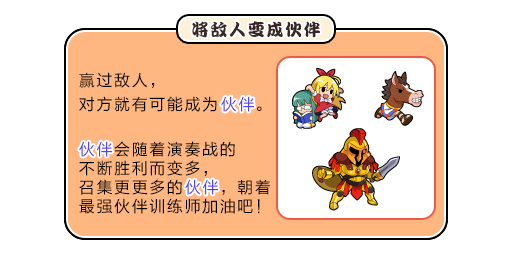
<style>
.page{position:relative;width:512px;height:256px;background:#ffffff}
.page>*{position:absolute;margin:0}
.t1{font:17px "DFPKanTingLiuW9";letter-spacing:0.1em;color:#3b2626}
.t2{font:16px/24px "FZLTHJW--GB1-0";letter-spacing:0.1em;color:#000000}
.t3{font:16px/24px "FZLTHJW--GB1-0";letter-spacing:0.1em;color:#5444ed}
.t4{font:16px "FZLTHJW--GB1-0";letter-spacing:0.1em;color:#5444ed}
.t5{font:16px/19px "FZLTHJW--GB1-0";letter-spacing:0.1em;color:#000000}
.t6{font:16px/19px "FZLTHJW--GB1-0";letter-spacing:0.1em;color:#5444ed}
</style>
<div class="page">
<p class="t1" style="left:192px;top:21px;width:129px;height:17px">将敌人变成伙伴</p>
<p class="t2" style="left:79px;top:72px;width:183px;height:40px">赢过敌人，<br>对方就有可能成为<span class="t3">伙伴</span>。</p>
<p class="t4" style="left:221px;top:96px;width:33px;height:16px">伙伴</p>
<p class="t5" style="left:79px;top:141px;width:191px;height:73px"><span class="t6">伙伴</span>会随着演奏战的<br>不断胜利而变多，<br>召集更更多的<span class="t6">伙伴</span>，朝着<br>最强伙伴训练师加油吧！</p>
<p class="t4" style="left:79px;top:141px;width:33px;height:16px">伙伴</p>
<p class="t4" style="left:185px;top:179px;width:33px;height:16px">伙伴</p>
</div>
